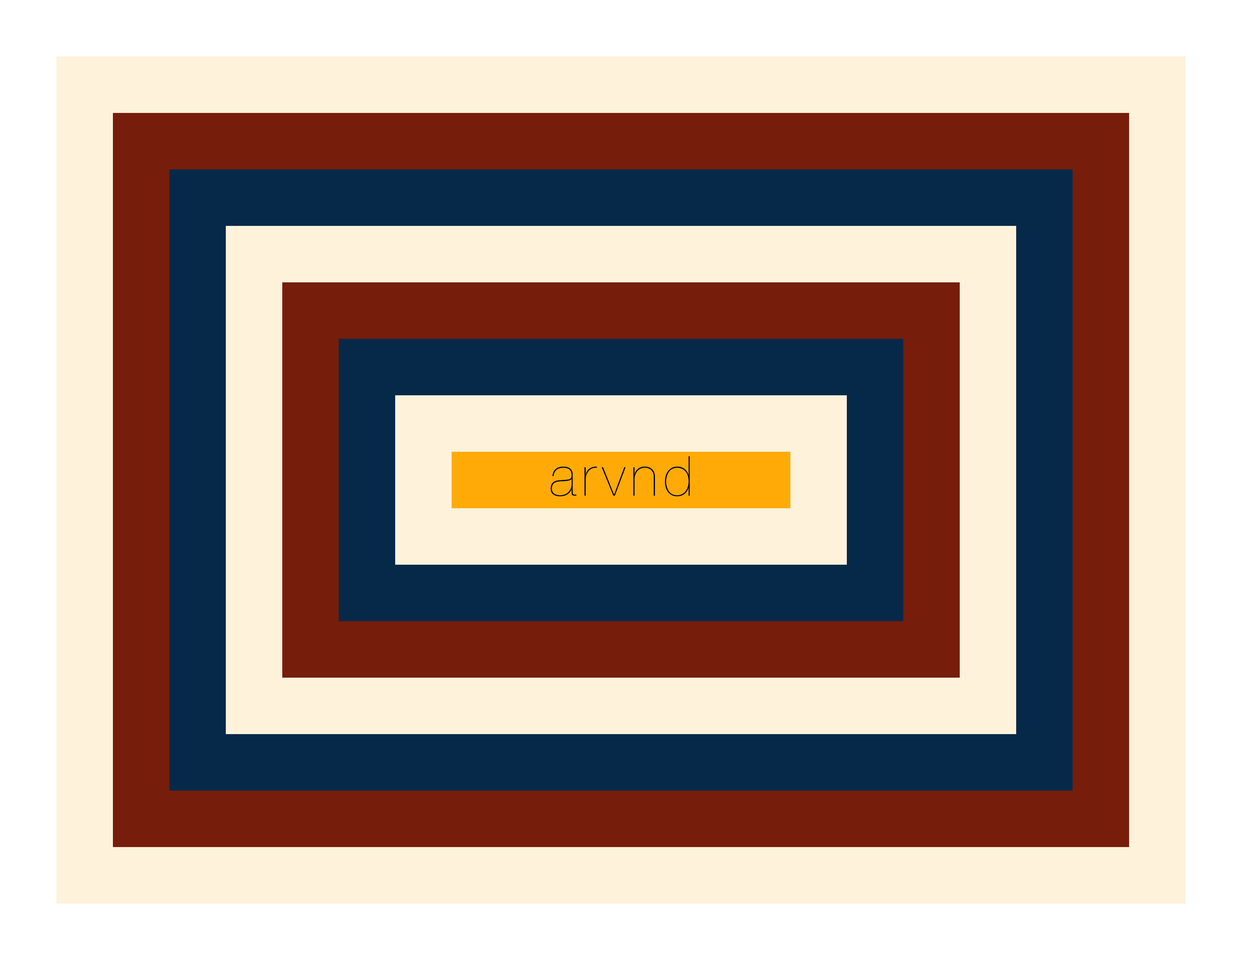
<style>
.page{position:relative;width:1242px;height:960px;background:#fef2db}
.page>*{position:absolute;margin:0}
.t1{font:55.2px "HelveticaNeue-UltraLight";letter-spacing:0.1em;color:#000000}
</style>
<div class="page">
<p class="t1" style="left:551px;top:456px;width:139px;height:41px">arvnd</p>
</div>
